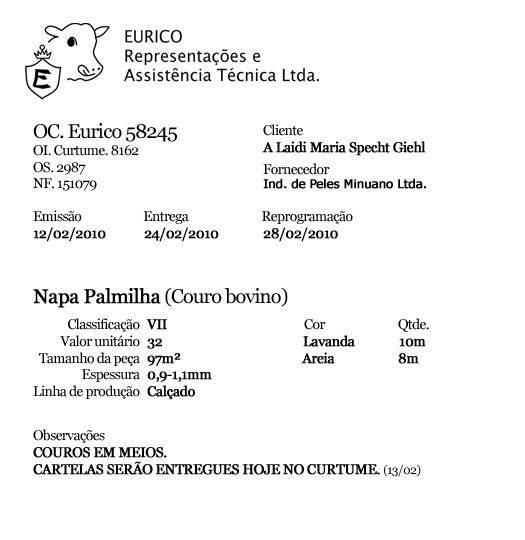
<style>
.page{position:relative;width:525px;height:540px;background:#ffffff}
.page>*{position:absolute;margin:0}
.t1{font:14px "Georgia";letter-spacing:-0.04em;color:#000000}
.t2{font:20px "Georgia";letter-spacing:-0.04em;color:#000000}
.t3{font:12px "Verdana";letter-spacing:-0.04em;color:#000000;font-weight:bold}
.t4{font:14px "Georgia";letter-spacing:-0.04em;color:#000000;font-weight:bold}
.t5{font:14px/5px "Georgia";letter-spacing:-0.04em;color:#000000}
.t6{font:20px "Georgia";letter-spacing:-0.04em;color:#000000;font-weight:bold}
.t7{font:14px/16.8px "Georgia";letter-spacing:-0.04em;color:#000000}
.t8{font:12px "Georgia";letter-spacing:-0.04em;color:#000000}
</style>
<div class="page">
<p class="t1" style="left:33px;top:123px;width:144px;height:68px"><span class="t2">OC. Eurico 58245<br></span>OI. Curtume. 8162<br>OS. 2987<br>NF. 151079</p>
<p class="t3" style="left:262px;top:124px;width:164px;height:65px"><span class="t1">Cliente<br></span><span class="t4">A Laidi Maria Specht Giehl<br><br></span><span class="t5">Fornecedor<br></span>Ind. de Peles Minuano Ltda.</p>
<p class="t1" style="left:33px;top:210px;width:320px;height:98px">Emissão                      Entrega                          Reprogramação<br><span class="t4">12/02/2010            24/02/2010              28/02/2010<br><br><br></span><span class="t6">Napa Palmilha</span><span class="t2"> (Couro bovino)</span></p>
<p class="t1" style="left:33px;top:318px;width:107px;height:81px;text-align:right">Classificação<br>Valor unitário<br>Tamanho da peça<br>Espessura<br>Linha de produção</p>
<p class="t4" style="left:146px;top:318px;width:283px;height:82px">VII                                           <span class="t7">Cor                          Qtde.<br></span>32                                            Lavanda              10m<br>97m²                                      Areia                    8m<br>0,9-1,1mm<br>Calçado</p>
<p class="t4" style="left:33px;top:429px;width:388px;height:48px"><span class="t1">Observações<br></span>COUROS EM MEIOS. <br>CARTELAS SERÃO ENTREGUES HOJE NO CURTUME. <span class="t8">(13/02)</span></p>
</div>
